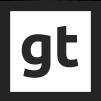
<style>
.page{position:relative;width:101px;height:101px;background:#ffffff}
.page>*{position:absolute;margin:0}
.t1{font:60px "Ubuntu-Bold";letter-spacing:-0.025em;color:#282828}
</style>
<div class="page">
<p class="t1" style="left:21px;top:24px;width:58px;height:53px">gt</p>
</div>
